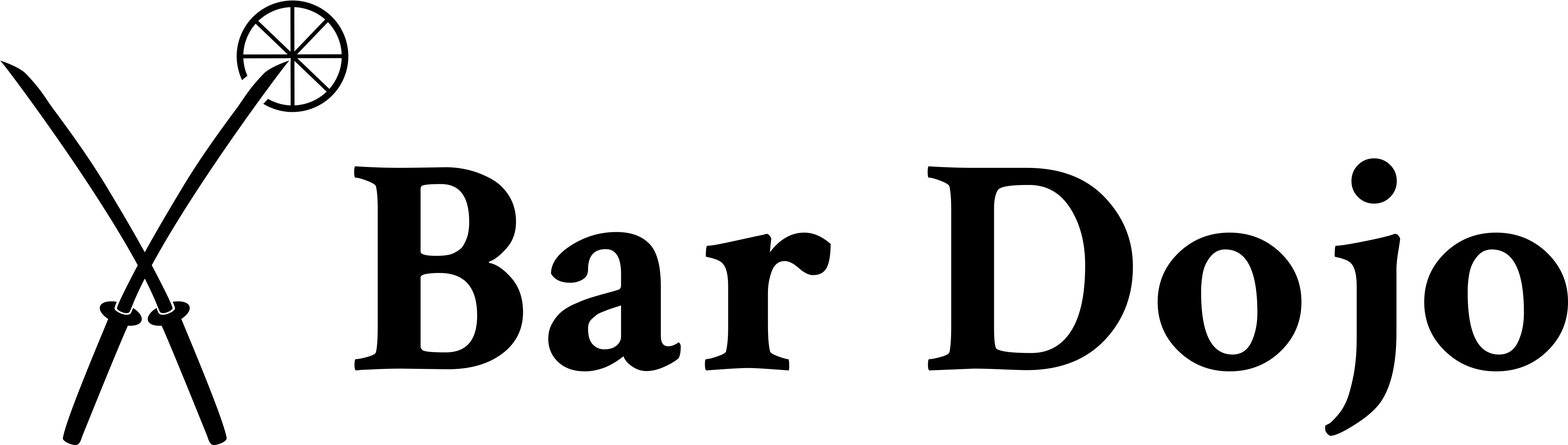
<style>
.page{position:relative;width:1568px;height:445px;background:#ffffff}
.page>*{position:absolute;margin:0}
.t1{font:313.2px "CrimsonText-Bold";letter-spacing:0.027em;color:#000000}
</style>
<div class="page">
<p class="t1" style="left:354px;top:158px;width:1214px;height:278px">Bar Dojo</p>
</div>
